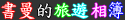
<style>
.page{position:relative;width:125px;height:20px;background:#333333}
.page>*{position:absolute;margin:0}
.t1{font:18px "DFKaiShu-SB-Estd-BF";color:#ffffff}
</style>
<div class="page">
<p class="t1" style="left:1px;top:2px;width:15px;height:17px">書</p>
<p class="t1" style="left:19px;top:2px;width:16px;height:17px">曼</p>
<p class="t1" style="left:37px;top:3px;width:15px;height:15px">的</p>
<p class="t1" style="left:54px;top:3px;width:17px;height:14px">旅</p>
<p class="t1" style="left:71px;top:3px;width:17px;height:15px">遊</p>
<p class="t1" style="left:91px;top:3px;width:15px;height:15px">相</p>
<p class="t1" style="left:108px;top:1px;width:16px;height:18px">簿</p>
</div>
